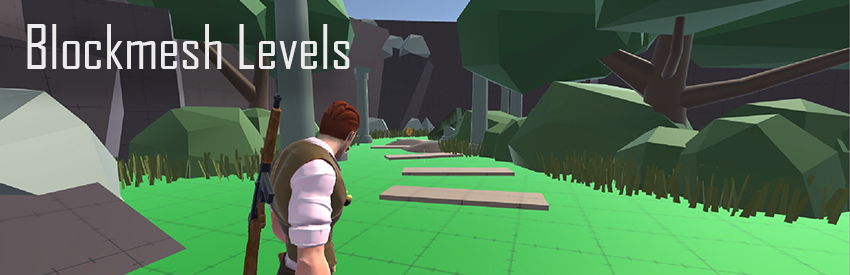
<style>
.page{position:relative;width:850px;height:275px}
.page>*{position:absolute;margin:0}
.t1{font:59.2px "AgencyFB-Reg";color:#ececec}
</style>
<div class="page">
<p class="t1" style="left:27px;top:24px;width:323px;height:45px">Blockmesh Levels</p>
</div>
